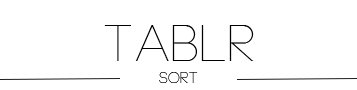
<style>
.page{position:relative;width:357px;height:90px;background:#ffffff}
.page>*{position:absolute;margin:0}
.t1{font:50px "Neou-Thin";color:#000000}
.t2{font:15px "Neou-Thin"}
</style>
<div class="page">
<p class="t1" style="left:104px;top:25px;width:150px;height:36px">Tablr</p>
<p class="t2" style="left:159px;top:72px;width:39px;height:11px">SORT</p>
</div>
